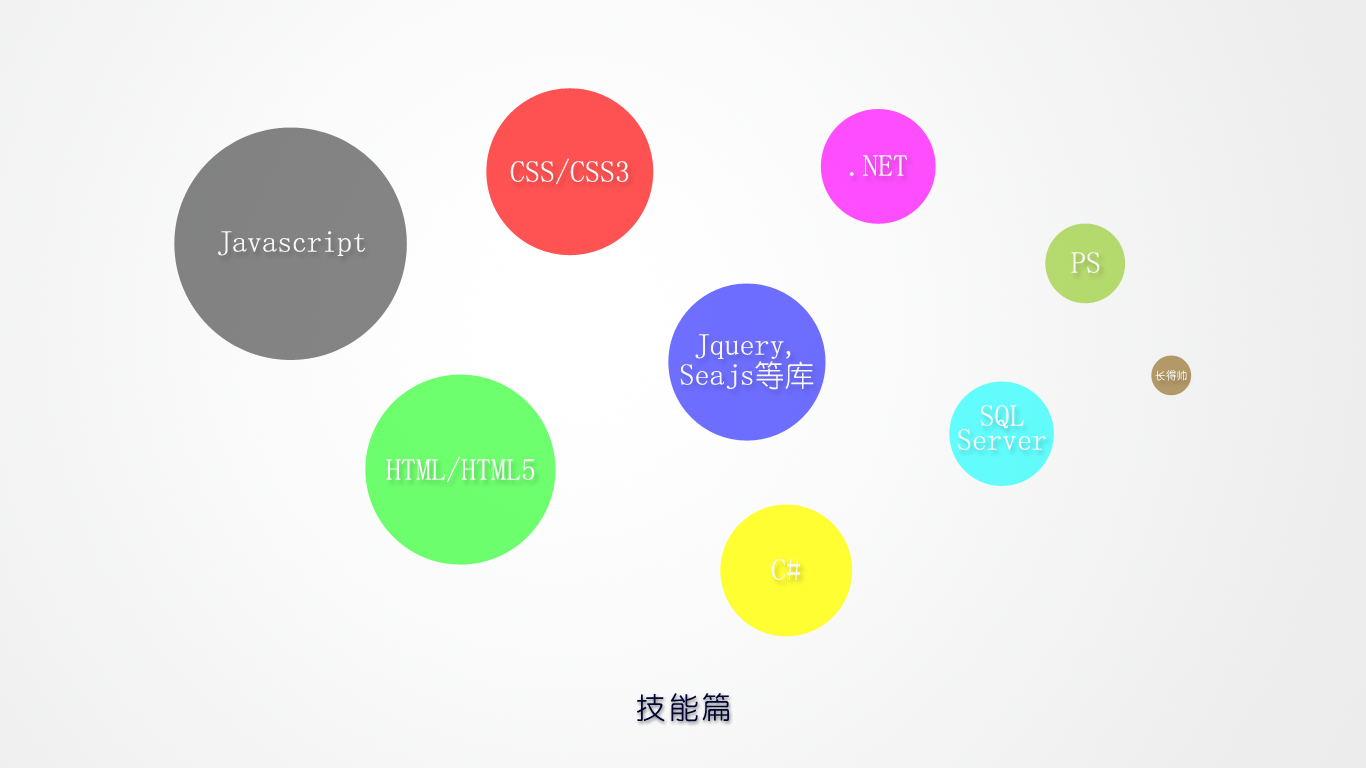
<style>
.page{position:relative;width:1366px;height:768px}
.page>*{position:absolute;margin:0}
.t1{font:30px "YouYuan";color:#f9f7f7}
.t2{font:30px/30px "YouYuan";color:#f9f7f7}
.t3{font:10.7px "YouYuan";color:#f9f7f7}
.t4{font:30px/24px "YouYuan";color:#f9f7f7}
.t5{font:30px "YouYuan";letter-spacing:0.1em;color:#000333}
</style>
<div class="page">
<p class="t1" style="left:510px;top:158px;width:119px;height:27px">CSS/CSS3</p>
<p class="t1" style="left:849px;top:155px;width:58px;height:21px">.NET</p>
<p class="t1" style="left:218px;top:231px;width:147px;height:25px">Javascript</p>
<p class="t1" style="left:1071px;top:252px;width:29px;height:21px">PS</p>
<p class="t2" style="left:680px;top:334px;width:134px;height:56px;text-align:center">Jquery,<br>Seajs等库</p>
<p class="t3" style="left:1155px;top:370px;width:32px;height:11px">长得帅</p>
<p class="t4" style="left:958px;top:405px;width:88px;height:45px;text-align:center">SQL<br>Server</p>
<p class="t1" style="left:386px;top:456px;width:149px;height:27px">HTML/HTML5</p>
<p class="t1" style="left:771px;top:559px;width:29px;height:21px">C#</p>
<p class="t5" style="left:637px;top:693px;width:92px;height:29px">技能篇</p>
</div>
